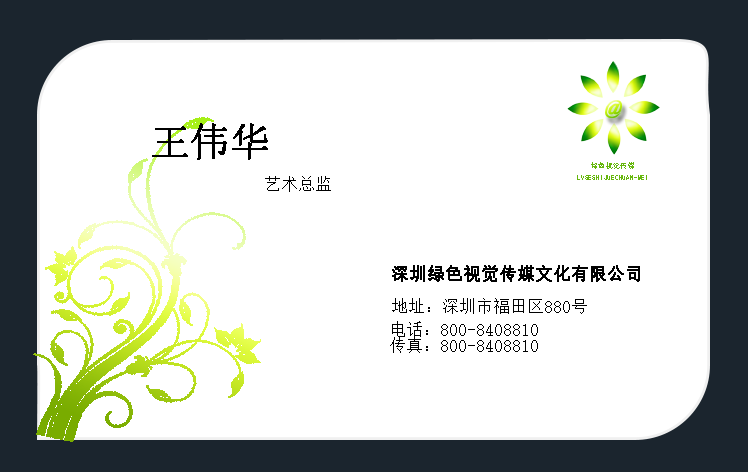
<style>
.page{position:relative;width:748px;height:472px;background:#ffffff}
.page>*{position:absolute;margin:0}
.t1{font:38.9px "SimSun";color:#000000;font-weight:bold}
.t2{font:6.9px/11.9px "SimHei";color:#66b70d;font-weight:bold}
.t3{font:16.7px "SimSun";color:#000000}
.t4{font:16.7px "SimSun";color:#010101;font-weight:bold}
.t5{font:16.7px "SimSun";color:#010101}
.t6{font:16.7px/16.7px "SimSun";color:#010101}
</style>
<div class="page">
<p class="t1" style="left:152px;top:123px;width:116px;height:37px">王伟华</p>
<p class="t2" style="left:577px;top:162px;width:70px;height:18px;text-align:center">绿色视觉传媒<br>LVSESHIJUECHUAN-MEI</p>
<p class="t3" style="left:265px;top:176px;width:66px;height:16px">艺术总监</p>
<p class="t4" style="left:392px;top:265px;width:248px;height:17px">深圳绿色视觉传媒文化有限公司</p>
<p class="t5" style="left:392px;top:298px;width:195px;height:16px">地址：深圳市福田区880号</p>
<p class="t6" style="left:390px;top:321px;width:148px;height:32px;text-align:center">电话：800-8408810<br>传真：800-8408810</p>
</div>
